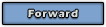
<style>
.page{position:relative;width:106px;height:27px;background:#7ea2ce}
.page>*{position:absolute;margin:0}
.t1{font:11px "ErasITCbyBT-Bold";letter-spacing:0.075em;color:#dadede}
</style>
<div class="page">
<p class="t1" style="left:28px;top:9px;width:50px;height:8px">Forward</p>
</div>
